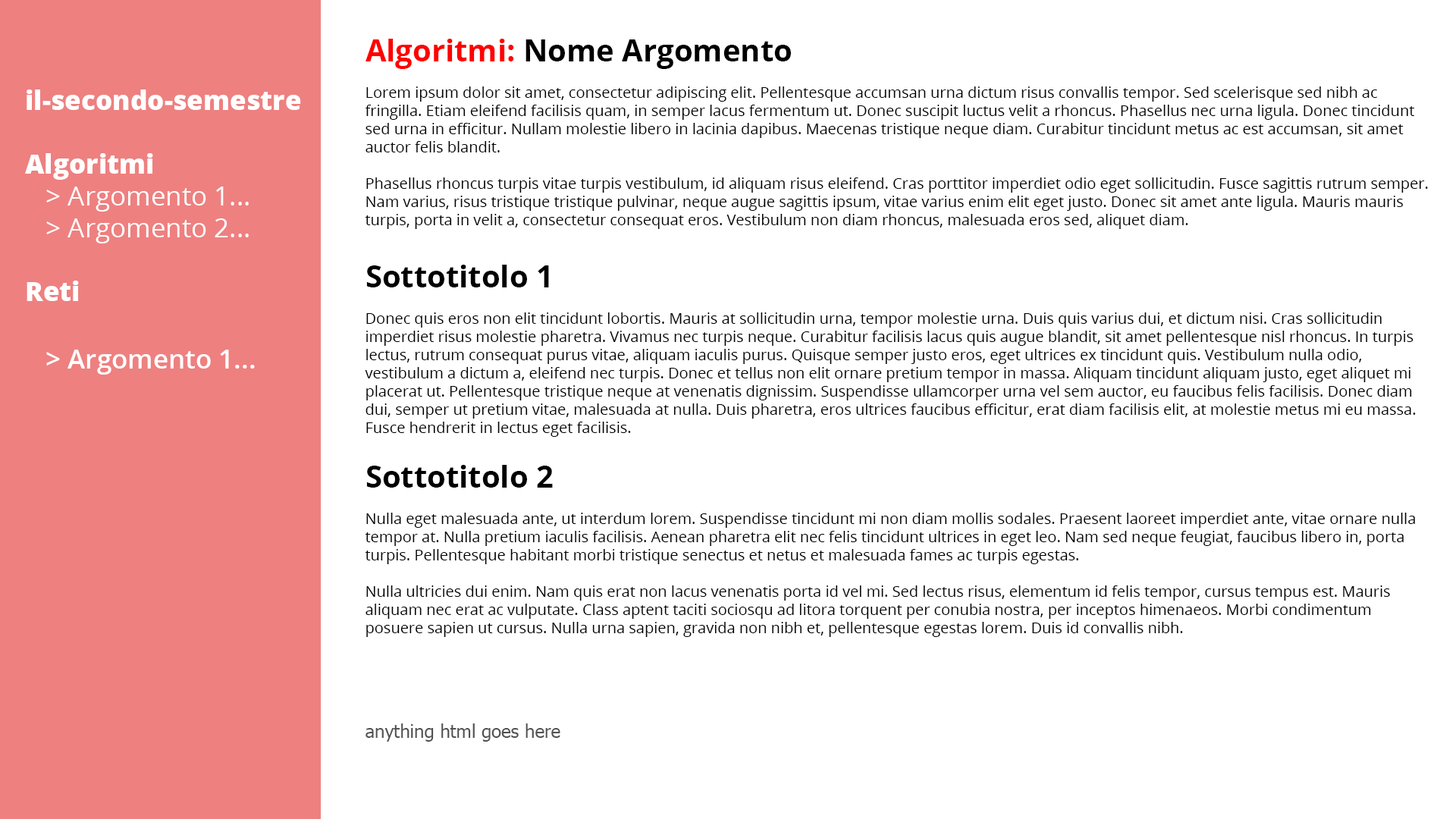
<style>
.page{position:relative;width:1456px;height:819px;background:#ffffff}
.page>*{position:absolute;margin:0}
.t1{font:15.2px "OpenSans-Regular";color:#000000}
.t2{font:30.3px "OpenSans-Bold";color:#ff0000}
.t3{font:30.3px "OpenSans-Bold";color:#000000}
.t4{font:26.5px "OpenSans-Regular";color:#ffffff}
.t5{font:26.5px "OpenSans-ExtraBold";color:#ffffff}
.t6{font:26.5px "OpenSans-SemiBold";color:#ffffff}
.t7{font:18.2px "Tahoma";color:#525252}
</style>
<div class="page">
<p class="t1" style="left:365px;top:39px;width:1063px;height:598px"><span class="t2">Algoritmi: </span><span class="t3">Nome Argomento<br><br></span>Lorem ipsum dolor sit amet, consectetur adipiscing elit. Pellentesque accumsan urna dictum risus convallis tempor. Sed scelerisque sed nibh ac fringilla. Etiam eleifend facilisis quam, in semper lacus fermentum ut. Donec suscipit luctus velit a rhoncus. Phasellus nec urna ligula. Donec tincidunt sed urna in efficitur. Nullam molestie libero in lacinia dapibus. Maecenas tristique neque diam. Curabitur tincidunt metus ac est accumsan, sit amet auctor felis blandit.<br><br>Phasellus rhoncus turpis vitae turpis vestibulum, id aliquam risus eleifend. Cras porttitor imperdiet odio eget sollicitudin. Fusce sagittis rutrum semper. Nam varius, risus tristique tristique pulvinar, neque augue sagittis ipsum, vitae varius enim elit eget justo. Donec sit amet ante ligula. Mauris mauris turpis, porta in velit a, consectetur consequat eros. Vestibulum non diam rhoncus, malesuada eros sed, aliquet diam.<br><br><span class="t3">Sottotitolo 1<br></span><br>Donec quis eros non elit tincidunt lobortis. Mauris at sollicitudin urna, tempor molestie urna. Duis quis varius dui, et dictum nisi. Cras sollicitudin imperdiet risus molestie pharetra. Vivamus nec turpis neque. Curabitur facilisis lacus quis augue blandit, sit amet pellentesque nisl rhoncus. In turpis lectus, rutrum consequat purus vitae, aliquam iaculis purus. Quisque semper justo eros, eget ultrices ex tincidunt quis. Vestibulum nulla odio, vestibulum a dictum a, eleifend nec turpis. Donec et tellus non elit ornare pretium tempor in massa. Aliquam tincidunt aliquam justo, eget aliquet mi placerat ut. Pellentesque tristique neque at venenatis dignissim. Suspendisse ullamcorper urna vel sem auctor, eu faucibus felis facilisis. Donec diam dui, semper ut pretium vitae, malesuada at nulla. Duis pharetra, eros ultrices faucibus efficitur, erat diam facilisis elit, at molestie metus mi eu massa. Fusce hendrerit in lectus eget facilisis.<br><br><span class="t3">Sottotitolo 2<br><br></span>Nulla eget malesuada ante, ut interdum lorem. Suspendisse tincidunt mi non diam mollis sodales. Praesent laoreet imperdiet ante, vitae ornare nulla tempor at. Nulla pretium iaculis facilisis. Aenean pharetra elit nec felis tincidunt ultrices in eget leo. Nam sed neque feugiat, faucibus libero in, porta turpis. Pellentesque habitant morbi tristique senectus et netus et malesuada fames ac turpis egestas.<br><br>Nulla ultricies dui enim. Nam quis erat non lacus venenatis porta id vel mi. Sed lectus risus, elementum id felis tempor, cursus tempus est. Mauris aliquam nec erat ac vulputate. Class aptent taciti sociosqu ad litora torquent per conubia nostra, per inceptos himenaeos. Morbi condimentum posuere sapien ut cursus. Nulla urna sapien, gravida non nibh et, pellentesque egestas lorem. Duis id convallis nibh.</p>
<p class="t4" style="left:25px;top:89px;width:276px;height:286px"><span class="t5">il-secondo-semestre<br><br>Algoritmi<br></span>   &gt; Argomento 1...<br>   &gt; Argomento 2...<br><span class="t5"><br>Reti<br></span><span class="t6">   &gt; Argomento 1...</span></p>
<p class="t7" style="left:366px;top:723px;width:194px;height:19px">anything html goes here</p>
</div>
